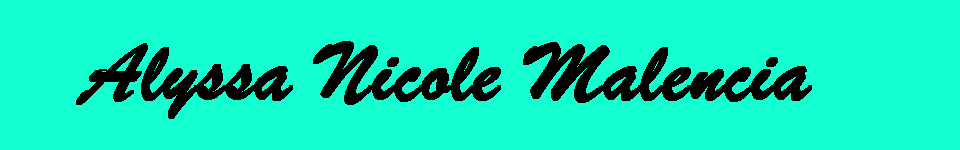
<style>
.page{position:relative;width:960px;height:150px;background:#14ffd0}
.page>*{position:absolute;margin:0}
.t1{font:87.5px "BrushScriptMT";color:#000000;font-weight:bold}
</style>
<div class="page">
<p class="t1" style="left:76px;top:41px;width:736px;height:78px">Alyssa Nicole Malencia</p>
</div>
